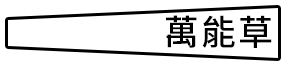
<style>
.page{position:relative;width:286px;height:66px;background:#ffffff}
.page>*{position:absolute;margin:0}
.t1{font:35px "NotoSansCJKtc-Medium";letter-spacing:0.06em;color:#000000}
</style>
<div class="page">
<p class="t1" style="left:166px;top:15px;width:106px;height:33px">萬能草</p>
</div>
